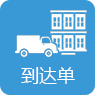
<style>
.page{position:relative;width:95px;height:95px;background:#3998d6}
.page>*{position:absolute;margin:0}
.t1{font:18px "MicrosoftYaHei";color:#ffffff}
</style>
<div class="page">
<p class="t1" style="left:21px;top:67px;width:54px;height:17px">到达单</p>
</div>
